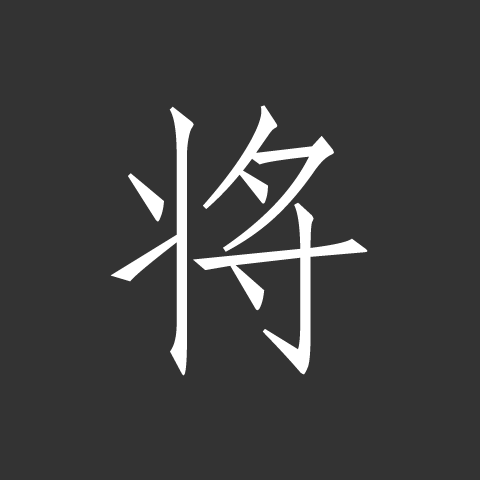
<style>
.page{position:relative;width:480px;height:480px;background:#333333}
.page>*{position:absolute;margin:0}
.t1{font:288px "STFangsong";color:#ffffff}
</style>
<div class="page">
<p class="t1" style="left:110px;top:105px;width:258px;height:271px">将</p>
</div>
